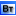
<style>
.page{position:relative;width:16px;height:16px}
.page>*{position:absolute;margin:0}
.t1{font:9px "Arial-BoldMT";color:#000000}
</style>
<div class="page">
<p class="t1" style="left:3px;top:5px;width:10px;height:7px">Вт</p>
</div>
